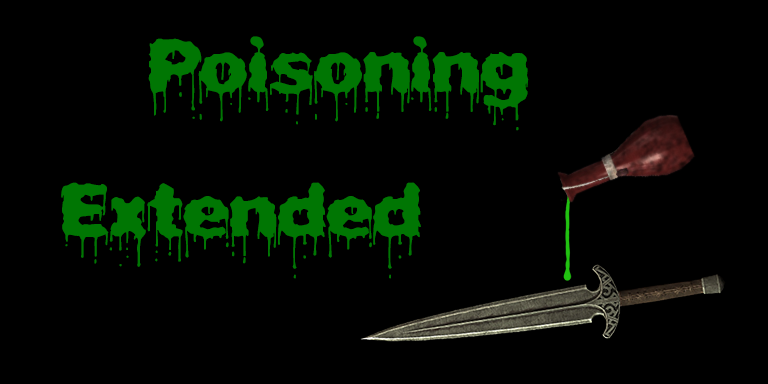
<style>
.page{position:relative;width:768px;height:384px;background:#000000}
.page>*{position:absolute;margin:0}
.t1{font:79.4px "PlasmaDripBRK";color:#007603}
</style>
<div class="page">
<p class="t1" style="left:148px;top:36px;width:381px;height:95px">Poisoning</p>
<p class="t1" style="left:61px;top:182px;width:360px;height:97px">Extended</p>
</div>
